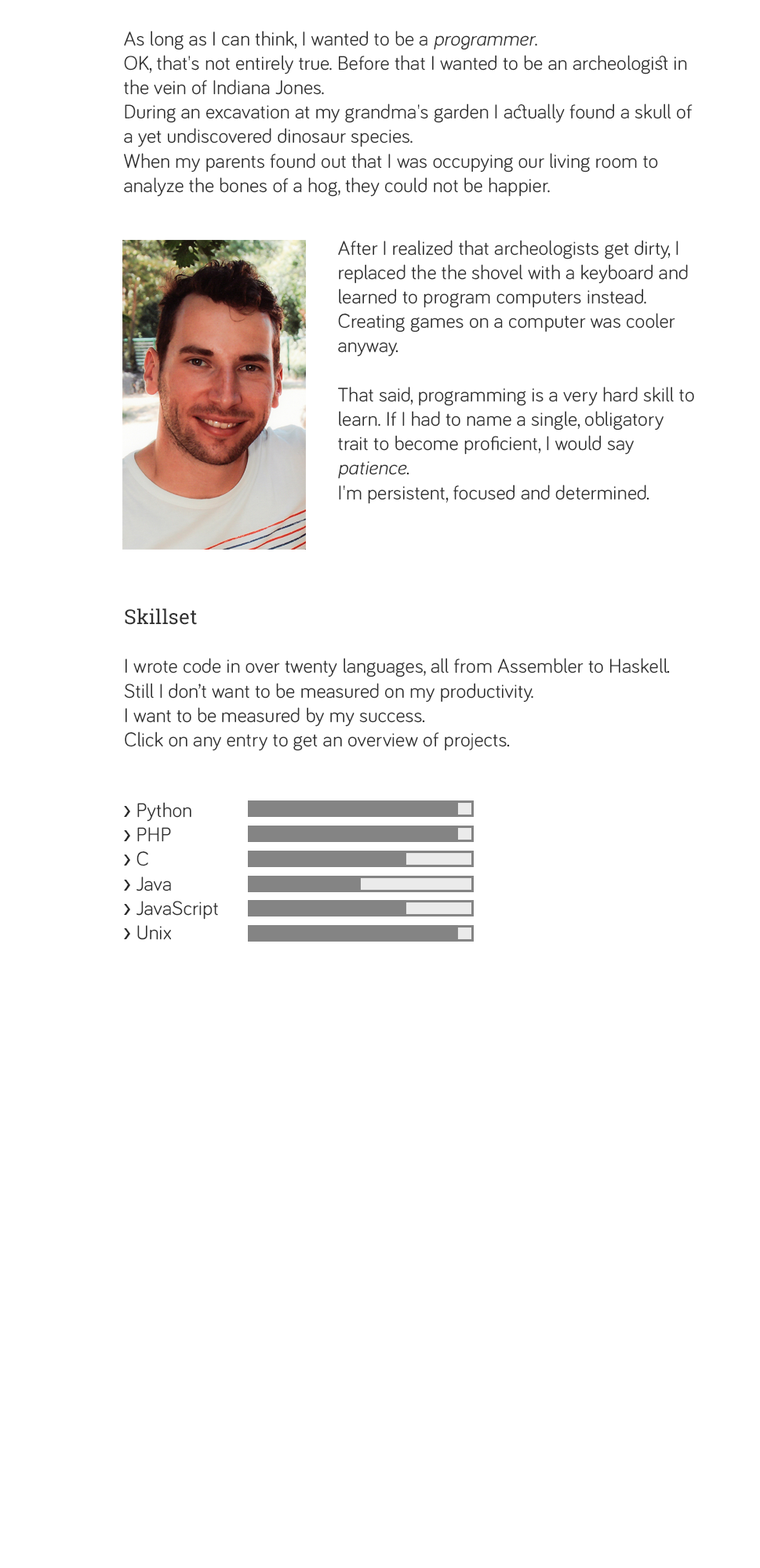
<style>
.page{position:relative;width:760px;height:1568px;background:#ffffff}
.page>*{position:absolute;margin:0}
.t1{font:20.4px "Bariol-Regular";color:#303030}
.t2{font:20.4px "BariolRegular-Italic";color:#303030}
.t3{font:20.4px "RobotoSlab-Regular";color:#303030}
</style>
<div class="page">
<p class="t1" style="left:124px;top:31px;width:568px;height:166px">As long as I can think, I wanted to be a <span class="t2">programmer</span>.<br>OK, that's not entirely true. Before that I wanted to be an archeologist in the vein of Indiana Jones.<br>During an excavation at my grandma's garden I actually found a skull of a yet undiscovered dinosaur species.<br>When my parents found out that I was occupying our living room to analyze the bones of a hog, they could not be happier.</p>
<p class="t1" style="left:338px;top:240px;width:356px;height:264px">After I realized that archeologists get dirty, I replaced the the shovel with a keyboard and learned to program computers instead.<br>Creating games on a computer was cooler anyway.<br><br>That said, programming is a very hard skill to learn. If I had to name a single, obligatory trait to become proficient, I would say <span class="t2">patience</span>.<br>I'm persistent, focused and determined.</p>
<p class="t1" style="left:125px;top:608px;width:545px;height:143px"><span class="t3">Skillset<br><br></span>I wrote code in over twenty languages, all from Assembler to Haskell.<br>Still I don’t want to be measured on my productivity. <br>I want to be measured by my success.<br>Click on any entry to get an overview of projects.</p>
<p class="t1" style="left:136px;top:802px;width:82px;height:138px">Python<br>PHP<br>C<br>Java<br>JavaScript<br>Unix</p>
</div>
